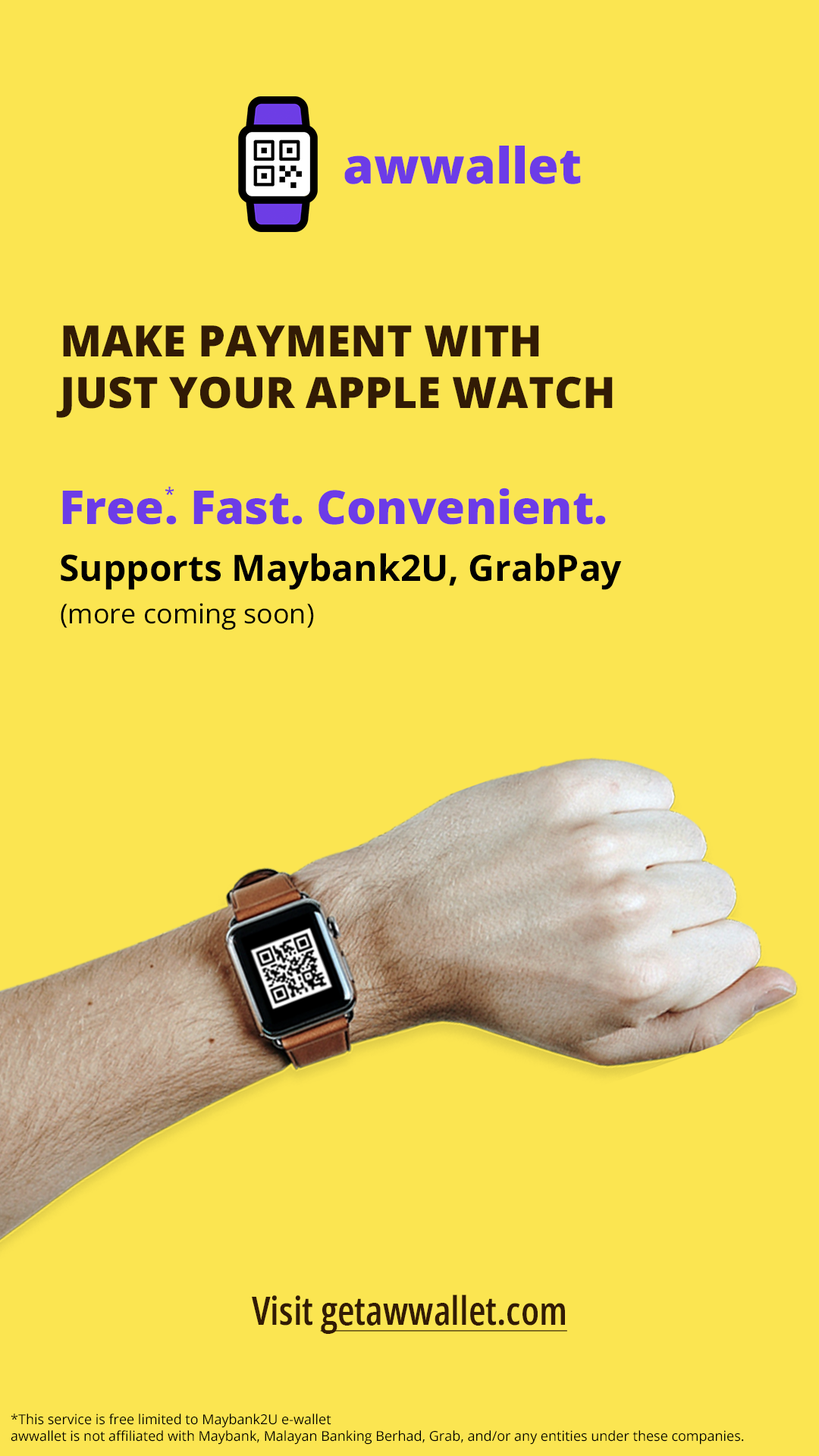
<style>
.page{position:relative;width:819px;height:1456px;background:#fbe551}
.page>*{position:absolute;margin:0}
.t1{font:49.9px "OpenSansRoman-ExtraBold";color:#6c3ce7}
.t2{font:43.3px "OpenSansRoman-ExtraBold";color:#321b05}
.t3{font:36.4px/56.9px "OpenSansRoman-Bold";color:#000000}
.t4{font:46.9px/49.3px "OpenSansRoman-ExtraBold";color:#6c3ce7}
.t5{font:18.2px "OpenSansRoman-SemiBold";color:#6c3ce7}
.t6{font:27.3px "OpenSans-Regular";color:#000000}
.t7{font:39.5px "OpenSansRoman-CondensedSemiBold";color:#321b05;text-decoration:underline}
.t8{font:39.5px "OpenSansRoman-CondensedSemiBold";color:#321b05}
.t9{font:13.6px "OpenSans-Regular";color:#000000}
</style>
<div class="page">
<p class="t1" style="left:344px;top:146px;width:237px;height:38px">awwallet</p>
<p class="t2" style="left:56px;top:325px;width:557px;height:93px">MAKE PAYMENT WITH<br>JUST YOUR APPLE WATCH</p>
<p class="t3" style="left:61px;top:488px;width:561px;height:102px"><span class="t4">Free. Fast. Convenient.<br></span>Supports Maybank2U, GrabPay</p>
<p class="t5" style="left:165px;top:486px;width:9px;height:9px">*</p>
<p class="t6" style="left:61px;top:603px;width:253px;height:27px">(more coming soon)</p>
<p class="t7" style="left:252px;top:1294px;width:315px;height:40px"><span class="t8">Visit </span>getawwallet.com</p>
<p class="t9" style="left:11px;top:1414px;width:733px;height:31px">*This service is free limited to Maybank2U e-wallet<br>awwallet is not affiliated with Maybank, Malayan Banking Berhad, Grab, and/or any entities under these companies.</p>
</div>
